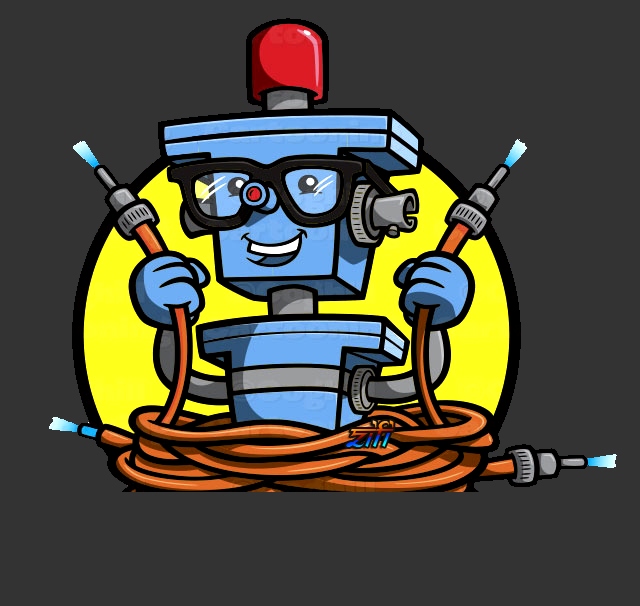
<style>
.page{position:relative;width:640px;height:606px;background:#333333}
.page>*{position:absolute;margin:0}
.t1{font:33.5px "SamarkanOblique";font-style:italic}
</style>
<div class="page">
<p class="t1" style="left:346px;top:420px;width:48px;height:27px">ZiFi</p>
</div>
